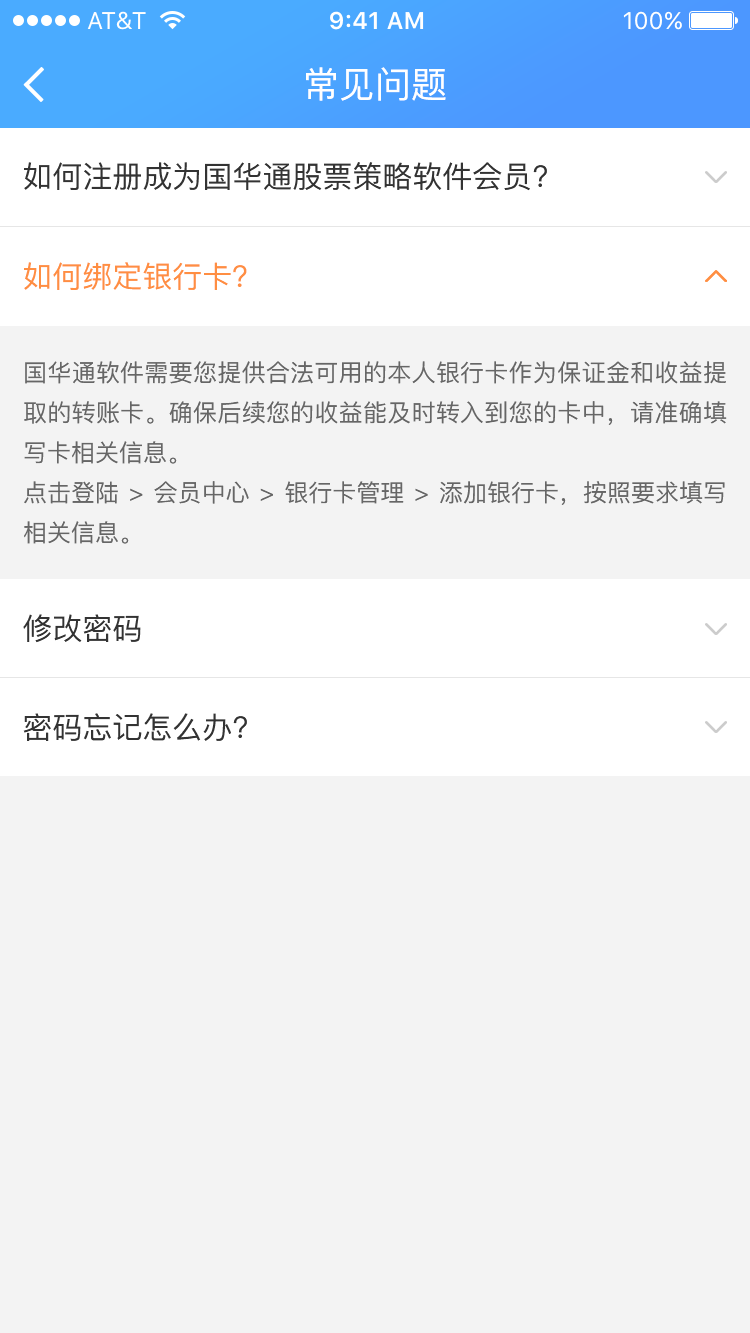
<style>
.page{position:relative;width:750px;height:1333px;background:#f3f3f3}
.page>*{position:absolute;margin:0}
.t1{font:36px "PingFang-SC-Medium";color:#ffffff}
.t2{font:30px "PingFang-SC-Medium";color:#333333}
.t3{font:30px "PingFang-SC-Medium";color:#ff8e42}
.t4{font:24px/40px "PingFang-SC-Medium";color:#666666}
</style>
<div class="page">
<p class="t1" style="left:306px;top:67px;width:140px;height:34px">常见问题</p>
<p class="t2" style="left:24px;top:162px;width:523px;height:29px">如何注册成为国华通股票策略软件会员?</p>
<p class="t3" style="left:24px;top:262px;width:223px;height:28px">如何绑定银行卡？</p>
<p class="t4" style="left:24px;top:361px;width:703px;height:183px;text-align:justify">国华通软件需要您提供合法可用的本人银行卡作为保证金和收益提取的转账卡。确保后续您的收益能及时转入到您的卡中，请准确填写卡相关信息。<br>点击登陆 &gt; 会员中心 &gt; 银行卡管理 &gt; 添加银行卡，按照要求填写相关信息。</p>
<p class="t2" style="left:23px;top:614px;width:118px;height:29px">修改密码</p>
<p class="t2" style="left:23px;top:713px;width:224px;height:28px">密码忘记怎么办?</p>
</div>
